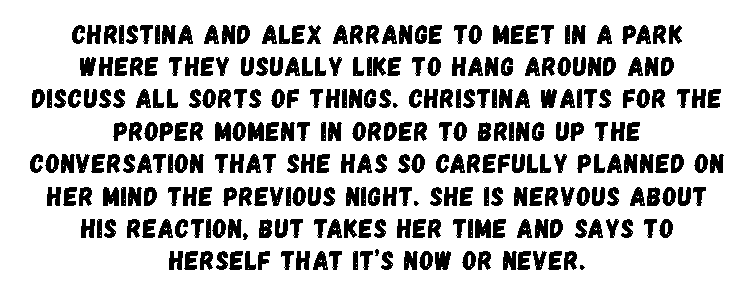
<style>
.page{position:relative;width:750px;height:282px;background:#ffffff}
.page>*{position:absolute;margin:0}
.t1{font:27px "Gagalin-Regular";letter-spacing:0.038em;color:#000000}
</style>
<div class="page">
<p class="t1" style="left:30px;top:25px;width:694px;height:245px;text-align:center">Christina and Alex arrange to meet in a park where they usually like to hang around and <br>discuss all sorts of things. Christina waits for the proper moment in order to bring up the <br>conversation that she has so carefully planned on her mind the previous night. She is nervous about his reaction, but takes her time and says to <br>herself that it’s now or never.</p>
</div>
